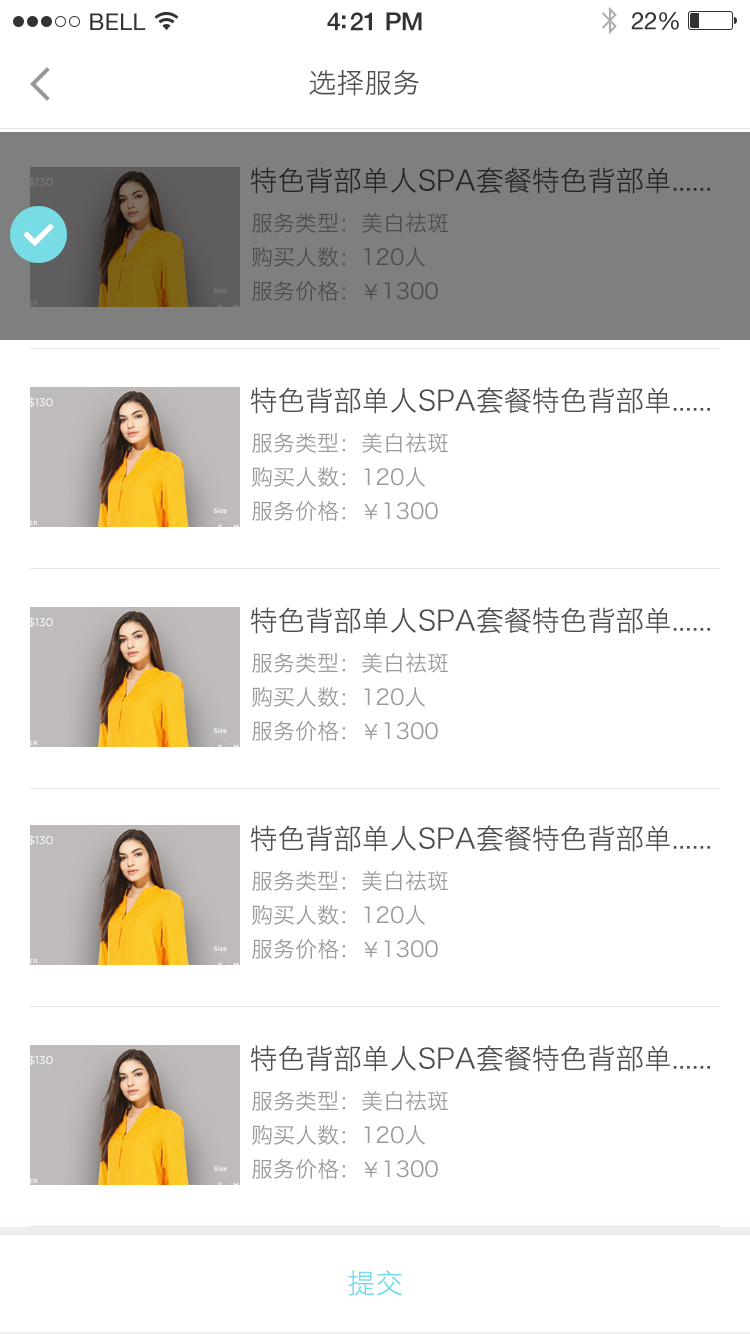
<style>
.page{position:relative;width:750px;height:1334px;background:#ffffff}
.page>*{position:absolute;margin:0}
.t1{font:28px "HiraginoSansGB-W3";color:#4d4d4d}
.t2{font:28px "HiraginoSansGB-W3";color:#262626}
.t3{font:22px/34px "HiraginoSansGB-W3";color:#4c4c4c}
.t4{font:20px/34px "HiraginoSansGB-W3";color:#4c4c4c}
.t5{font:22px/34px "HiraginoSansGB-W3";color:#999999}
.t6{font:20px/34px "HiraginoSansGB-W3";color:#999999}
.t7{font:28px "HiraginoSansGB-W3";color:#73dce6}
</style>
<div class="page">
<p class="t1" style="left:309px;top:70px;width:110px;height:26px">选择服务</p>
<p class="t2" style="left:250px;top:167px;width:460px;height:27px">特色背部单人SPA套餐特色背部单......</p>
<p class="t3" style="left:251px;top:212px;width:197px;height:90px;text-align:justify">服务类型：美白祛斑<br>购买人数：120人<br>服务价格：<span class="t4">￥</span>1300</p>
<p class="t1" style="left:250px;top:387px;width:460px;height:27px">特色背部单人SPA套餐特色背部单......</p>
<p class="t5" style="left:251px;top:432px;width:197px;height:90px;text-align:justify">服务类型：美白祛斑<br>购买人数：120人<br>服务价格：<span class="t6">￥</span>1300</p>
<p class="t1" style="left:250px;top:607px;width:460px;height:27px">特色背部单人SPA套餐特色背部单......</p>
<p class="t5" style="left:251px;top:652px;width:197px;height:90px;text-align:justify">服务类型：美白祛斑<br>购买人数：120人<br>服务价格：<span class="t6">￥</span>1300</p>
<p class="t1" style="left:250px;top:825px;width:460px;height:27px">特色背部单人SPA套餐特色背部单......</p>
<p class="t5" style="left:251px;top:870px;width:197px;height:90px;text-align:justify">服务类型：美白祛斑<br>购买人数：120人<br>服务价格：<span class="t6">￥</span>1300</p>
<p class="t1" style="left:250px;top:1045px;width:460px;height:27px">特色背部单人SPA套餐特色背部单......</p>
<p class="t5" style="left:251px;top:1090px;width:197px;height:90px;text-align:justify">服务类型：美白祛斑<br>购买人数：120人<br>服务价格：<span class="t6">￥</span>1300</p>
<p class="t7" style="left:348px;top:1270px;width:54px;height:26px">提交</p>
</div>
